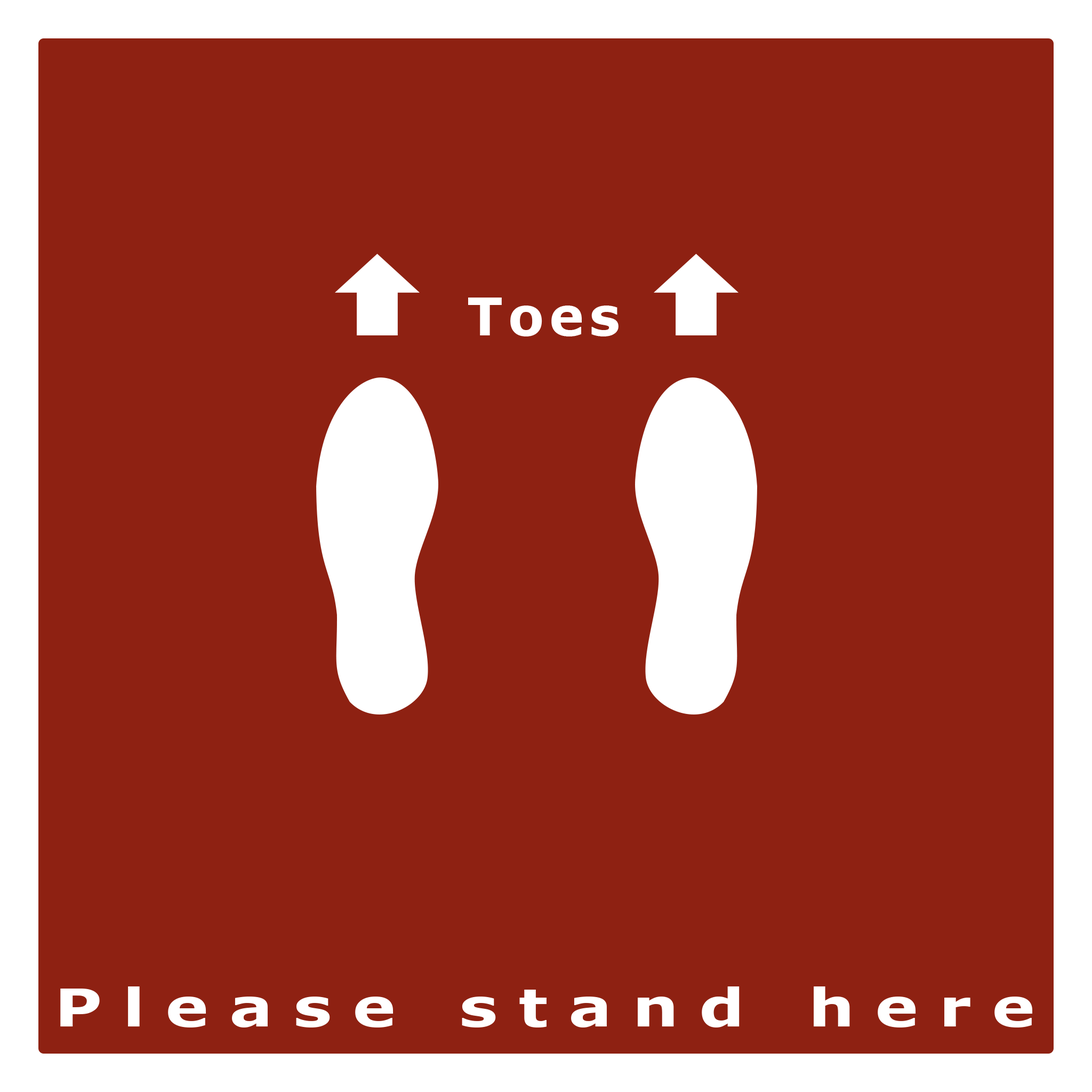
<style>
.page{position:relative;width:1092px;height:1092px;background:#8e2112}
.page>*{position:absolute;margin:0}
.t1{font:52.3px "Verdana-Bold";letter-spacing:0.1em;color:#ffffff}
.t2{font:52.3px "Verdana-Bold";letter-spacing:0.32em;color:#ffffff;scale:1.24 1}
</style>
<div class="page">
<p class="t1" style="left:468px;top:298px;width:151px;height:38px">Toes</p>
<p class="t2" style="left:60px;top:986px;width:972px;height:41px">Please stand here</p>
</div>
